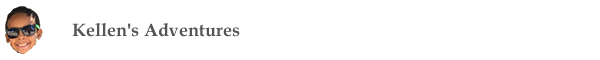
<style>
.page{position:relative;width:600px;height:60px;background:#ffffff}
.page>*{position:absolute;margin:0}
.t1{font:18px "BookAntiqua-Bold";color:#555555}
</style>
<div class="page">
<p class="t1" style="left:72px;top:23px;width:168px;height:14px">Kellen's Adventures</p>
</div>
